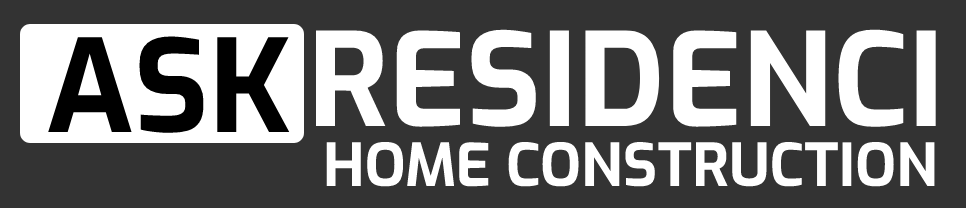
<style>
.page{position:relative;width:966px;height:208px;background:#333333}
.page>*{position:absolute;margin:0}
.t1{font:129px "Exo-Bold";color:#ffffff}
.t2{font:128px "Exo-Bold";color:#000000}
.t3{font:59px "Exo-Bold";color:#ffffff}
</style>
<div class="page">
<p class="t1" style="left:315px;top:29px;width:621px;height:98px">RESIDENCI</p>
<p class="t2" style="left:48px;top:36px;width:242px;height:97px">ASK</p>
<p class="t3" style="left:326px;top:141px;width:609px;height:46px">HOME CONSTRUCTION</p>
</div>
